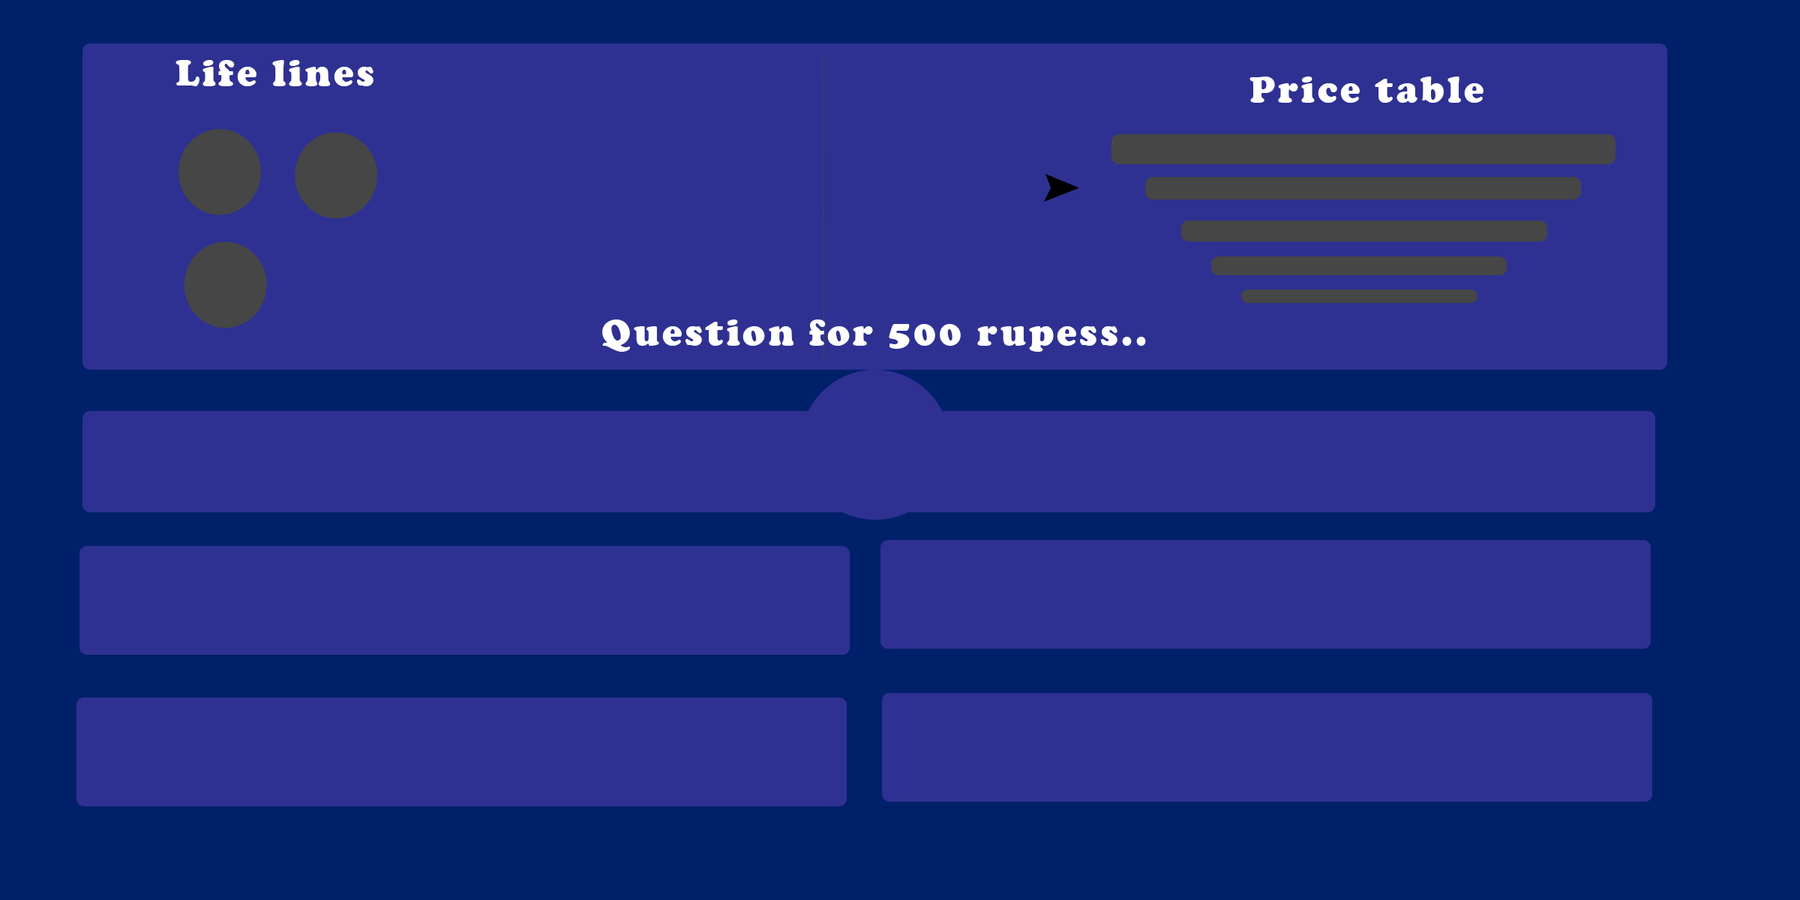
<style>
.page{position:relative;width:1800px;height:900px;background:#2e3192}
.page>*{position:absolute;margin:0}
.t1{font:9px "CooperBlack";letter-spacing:0.08em;color:#ffffff}
</style>
<div class="page">
<p class="t1" style="left:176px;top:60px;width:198px;height:26px">Life lines</p>
<p class="t1" style="left:1250px;top:76px;width:234px;height:27px">Price table</p>
<p class="t1" style="left:602px;top:320px;width:544px;height:32px">Question for 500 rupess..</p>
</div>
